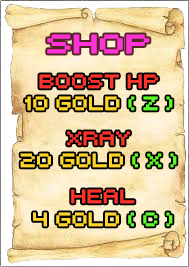
<style>
.page{position:relative;width:189px;height:267px}
.page>*{position:absolute;margin:0}
.t1{font:25.7px "RetroComputerRUSbyDaymarius";color:#ff34d6;font-weight:bold;scale:1.18 1}
.t2{font:18.7px "RetroComputerRUSbyDaymarius";font-weight:bold}
</style>
<div class="page">
<p class="t1" style="left:47px;top:34px;width:103px;height:20px">SHOP</p>
<p class="t2" style="left:25px;top:74px;width:148px;height:37px;text-align:center">boost hp<br>10 gold ( z )</p>
<p class="t2" style="left:20px;top:131px;width:157px;height:37px;text-align:center">XRAY<br>20 Gold ( x )</p>
<p class="t2" style="left:33px;top:189px;width:140px;height:38px;text-align:center">Heal<br>4 Gold ( c )</p>
</div>
